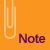
<style>
.page{position:relative;width:50px;height:50px;background:#fa961f}
.page>*{position:absolute;margin:0}
.t1{font:13px "Arial-BoldMT";letter-spacing:-0.04em;color:#630460}
</style>
<div class="page">
<p class="t1" style="left:19px;top:33px;width:27px;height:10px">Note</p>
</div>
